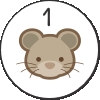
<style>
.page{position:relative;width:100px;height:100px;background:#ffffff}
.page>*{position:absolute;margin:0}
.t1{font:24px "DeliusUnicase-Regular";color:#333131}
</style>
<div class="page">
<p class="t1" style="left:42px;top:7px;width:9px;height:20px">1</p>
</div>
